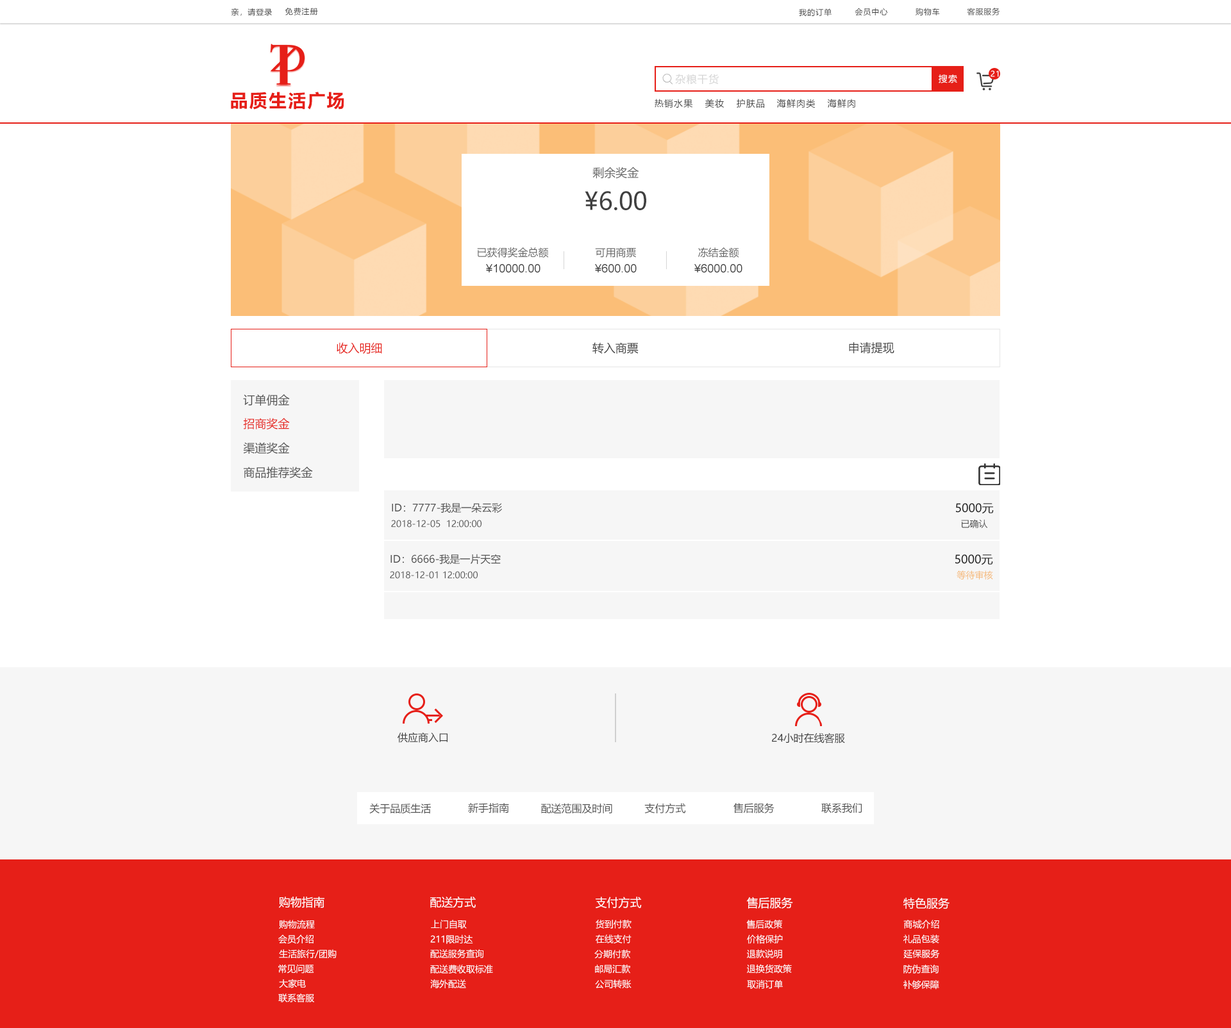
<style>
.page{position:relative;width:1231px;height:1028px;background:#ffffff}
.page>*{position:absolute;margin:0}
.t1{font:7.7px "MicrosoftYaHei";letter-spacing:0.08em;color:#404040}
.t2{font:10.3px "MicrosoftYaHei";letter-spacing:0.08em;color:#d6d6d6}
.t3{font:9px "MicrosoftYaHei";letter-spacing:0.08em;color:#ffffff}
.t4{font:7.7px "MicrosoftYaHei";letter-spacing:0.08em;color:#ffffff}
.t5{font:17.9px "MicrosoftYaHei-Bold";letter-spacing:0.08em;color:#e61f18}
.t6{font:9px "MicrosoftYaHei";letter-spacing:0.08em;color:#404040}
.t7{font:11.5px "MicrosoftYaHei";color:#666666}
.t8{font:24.4px "MicrosoftYaHei";color:#404040}
.t9{font:10.3px "MicrosoftYaHei";color:#666666}
.t10{font:11.5px "ArialMT";color:#404040}
.t11{font:11.5px "MicrosoftYaHei";color:#e61f18}
.t12{font:11.5px "MicrosoftYaHei";color:#404040}
.t13{font:11.5px "MicrosoftYaHei";color:#505050}
.t14{font:10.3px "MicrosoftYaHei";color:#505050}
.t15{font:11.5px "MicrosoftYaHei";color:#202020}
.t16{font:9px "MicrosoftYaHei";color:#505050}
.t17{font:9px "MicrosoftYaHei";color:#f5b876}
.t18{font:10.3px "MicrosoftYaHei";color:#404040}
.t19{font:11.5px "MicrosoftYaHei";color:#ffffff}
.t20{font:9px "MicrosoftYaHei";color:#ffffff}
</style>
<div class="page">
<p class="t1" style="left:231px;top:8px;width:41px;height:8px">亲，请登录</p>
<p class="t1" style="left:285px;top:8px;width:33px;height:7px">免费注册</p>
<p class="t1" style="left:799px;top:8px;width:32px;height:8px">我的订单</p>
<p class="t1" style="left:854px;top:8px;width:34px;height:8px">会员中心</p>
<p class="t1" style="left:915px;top:8px;width:25px;height:8px">购物车</p>
<p class="t1" style="left:967px;top:8px;width:33px;height:7px">客服服务</p>
<p class="t2" style="left:675px;top:74px;width:44px;height:11px">杂粮干货</p>
<p class="t3" style="left:938px;top:74px;width:19px;height:9px">搜索</p>
<p class="t4" style="left:990px;top:71px;width:9px;height:6px">21</p>
<p class="t5" style="left:231px;top:92px;width:113px;height:18px">品质生活广场</p>
<p class="t6" style="left:654px;top:99px;width:39px;height:9px">热销水果</p>
<p class="t6" style="left:705px;top:99px;width:19px;height:9px">美妆</p>
<p class="t6" style="left:737px;top:99px;width:27px;height:9px">护肤品</p>
<p class="t6" style="left:776px;top:99px;width:39px;height:9px">海鲜肉类</p>
<p class="t6" style="left:827px;top:99px;width:28px;height:9px">海鲜肉</p>
<p class="t7" style="left:592px;top:167px;width:47px;height:12px">剩余奖金</p>
<p class="t8" style="left:585px;top:191px;width:61px;height:19px">¥6.00</p>
<p class="t9" style="left:477px;top:247px;width:72px;height:11px">已获得奖金总额</p>
<p class="t9" style="left:595px;top:247px;width:41px;height:11px">可用商票</p>
<p class="t9" style="left:698px;top:247px;width:41px;height:11px">冻结金额</p>
<p class="t10" style="left:486px;top:264px;width:54px;height:9px">¥10000.00</p>
<p class="t10" style="left:595px;top:264px;width:42px;height:9px">¥600.00</p>
<p class="t10" style="left:694px;top:264px;width:48px;height:9px">¥6000.00</p>
<p class="t11" style="left:337px;top:342px;width:45px;height:12px">收入明细</p>
<p class="t12" style="left:592px;top:342px;width:46px;height:12px">转入商票</p>
<p class="t12" style="left:849px;top:342px;width:45px;height:12px">申请提现</p>
<p class="t13" style="left:243px;top:394px;width:47px;height:12px">订单佣金</p>
<p class="t11" style="left:243px;top:418px;width:47px;height:11px">招商奖金</p>
<p class="t13" style="left:243px;top:442px;width:47px;height:12px">渠道奖金</p>
<p class="t13" style="left:244px;top:467px;width:69px;height:11px">商品推荐奖金</p>
<p class="t14" style="left:392px;top:503px;width:110px;height:10px">ID：7777-我是一朵云彩</p>
<p class="t15" style="left:956px;top:503px;width:38px;height:11px">5000元</p>
<p class="t16" style="left:391px;top:520px;width:90px;height:8px">2018-12-05  12:00:00</p>
<p class="t16" style="left:961px;top:519px;width:27px;height:10px">已确认</p>
<p class="t14" style="left:390px;top:554px;width:111px;height:11px">ID：6666-我是一片天空</p>
<p class="t15" style="left:955px;top:554px;width:38px;height:11px">5000元</p>
<p class="t16" style="left:390px;top:571px;width:88px;height:8px">2018-12-01 12:00:00</p>
<p class="t17" style="left:956px;top:571px;width:37px;height:9px">等待审核</p>
<p class="t18" style="left:397px;top:732px;width:50px;height:11px">供应商入口</p>
<p class="t18" style="left:772px;top:733px;width:73px;height:11px">24小时在线客服</p>
<p class="t14" style="left:369px;top:803px;width:62px;height:11px">关于品质生活</p>
<p class="t14" style="left:468px;top:803px;width:41px;height:10px">新手指南</p>
<p class="t14" style="left:541px;top:803px;width:71px;height:11px">配送范围及时间</p>
<p class="t14" style="left:644px;top:803px;width:42px;height:10px">支付方式</p>
<p class="t14" style="left:733px;top:803px;width:41px;height:10px">售后服务</p>
<p class="t14" style="left:821px;top:803px;width:41px;height:10px">联系我们</p>
<p class="t19" style="left:279px;top:897px;width:45px;height:11px">购物指南</p>
<p class="t19" style="left:430px;top:897px;width:46px;height:11px">配送方式</p>
<p class="t19" style="left:596px;top:897px;width:46px;height:11px">支付方式</p>
<p class="t19" style="left:746px;top:897px;width:47px;height:12px">售后服务</p>
<p class="t19" style="left:903px;top:897px;width:46px;height:13px">特色服务</p>
<p class="t20" style="left:279px;top:920px;width:36px;height:9px">购物流程</p>
<p class="t20" style="left:431px;top:920px;width:36px;height:9px">上门自取</p>
<p class="t20" style="left:596px;top:920px;width:35px;height:9px">货到付款</p>
<p class="t20" style="left:746px;top:920px;width:36px;height:9px">售后政策</p>
<p class="t20" style="left:903px;top:920px;width:36px;height:9px">商城介绍</p>
<p class="t20" style="left:278px;top:935px;width:35px;height:9px">会员介绍</p>
<p class="t20" style="left:430px;top:935px;width:43px;height:9px">211限时达</p>
<p class="t20" style="left:596px;top:935px;width:35px;height:9px">在线支付</p>
<p class="t20" style="left:747px;top:935px;width:36px;height:9px">价格保护</p>
<p class="t20" style="left:903px;top:935px;width:36px;height:9px">礼品包装</p>
<p class="t20" style="left:279px;top:949px;width:58px;height:9px">生活旅行/团购</p>
<p class="t20" style="left:430px;top:949px;width:53px;height:9px">配送服务查询</p>
<p class="t20" style="left:594px;top:949px;width:36px;height:10px">分期付款</p>
<p class="t20" style="left:747px;top:949px;width:35px;height:10px">退款说明</p>
<p class="t20" style="left:903px;top:949px;width:37px;height:9px">延保服务</p>
<p class="t20" style="left:278px;top:965px;width:36px;height:9px">常见问题</p>
<p class="t20" style="left:430px;top:965px;width:63px;height:9px">配送费收取标准</p>
<p class="t20" style="left:595px;top:965px;width:35px;height:9px">邮局汇款</p>
<p class="t20" style="left:747px;top:964px;width:45px;height:10px">退换货政策</p>
<p class="t20" style="left:903px;top:965px;width:35px;height:9px">防伪查询</p>
<p class="t20" style="left:279px;top:979px;width:27px;height:9px">大家电</p>
<p class="t20" style="left:430px;top:979px;width:36px;height:9px">海外配送</p>
<p class="t20" style="left:595px;top:979px;width:36px;height:10px">公司转账</p>
<p class="t20" style="left:747px;top:980px;width:36px;height:9px">取消订单</p>
<p class="t20" style="left:903px;top:980px;width:36px;height:10px">补够保障</p>
<p class="t20" style="left:278px;top:994px;width:36px;height:9px">联系客服</p>
</div>
